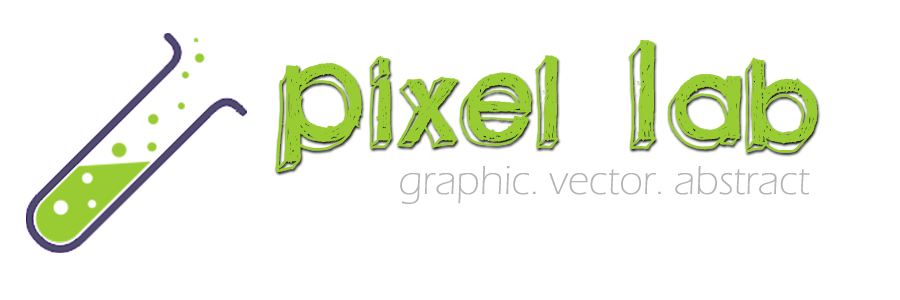
<style>
.page{position:relative;width:900px;height:300px;background:#ffffff}
.page>*{position:absolute;margin:0}
.t1{font:195.8px "Greenpiloww";color:#99cc33}
.t2{font:41.7px "ErasITC-Light";color:#b3b4b4}
</style>
<div class="page">
<p class="t1" style="left:275px;top:39px;width:543px;height:134px">Pixel Lab</p>
<p class="t2" style="left:400px;top:166px;width:410px;height:38px">graphic. vector. abstract</p>
</div>
